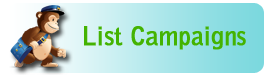
<style>
.page{position:relative;width:275px;height:75px}
.page>*{position:absolute;margin:0}
.t1{font:25.6px "BellGothicStd-Bold";letter-spacing:-0.01em;color:#44b301;font-weight:bold;scale:0.97 1}
</style>
<div class="page">
<p class="t1" style="left:84px;top:26px;width:162px;height:24px">List Campaigns</p>
</div>
